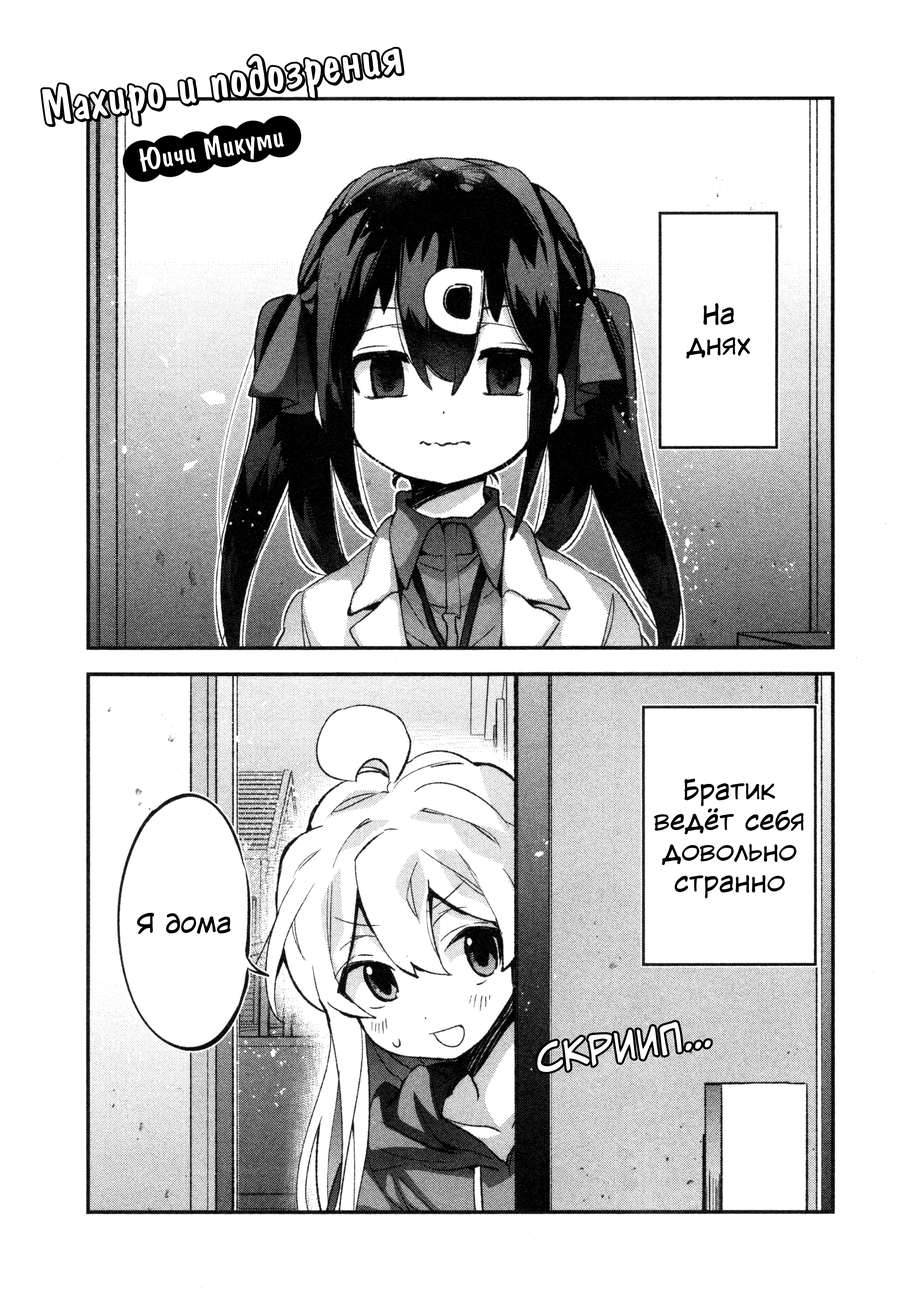
<style>
.page{position:relative;width:909px;height:1312px;background:#ffffff}
.page>*{position:absolute;margin:0}
.t1{font:30.7px "ADomIno";letter-spacing:0.006em;color:#ffffff}
.t2{font:25.6px "CCWildWordsLower-Regular";letter-spacing:0.006em;color:#000000}
.t3{font:25.6px "v_CCWildWordsLower";letter-spacing:0.006em;color:#000000}
.t4{font:35.8px "CCMeanwhile";letter-spacing:0.006em;color:#ffffff}
</style>
<div class="page">
<p class="t1" style="left:139px;top:132px;width:145px;height:40px;rotate:-10deg">Юичи Микуми</p>
<p class="t2" style="left:686px;top:303px;width:64px;height:56px;text-align:center">На<br>днях</p>
<p class="t2" style="left:654px;top:779px;width:149px;height:120px;text-align:center">Братик ведёт себя довольно странно</p>
<p class="t3" style="left:137px;top:913px;width:93px;height:21px">Я дома</p>
<p class="t4" style="left:537px;top:1022px;width:174px;height:50px;rotate:-9deg">скриип...</p>
</div>
